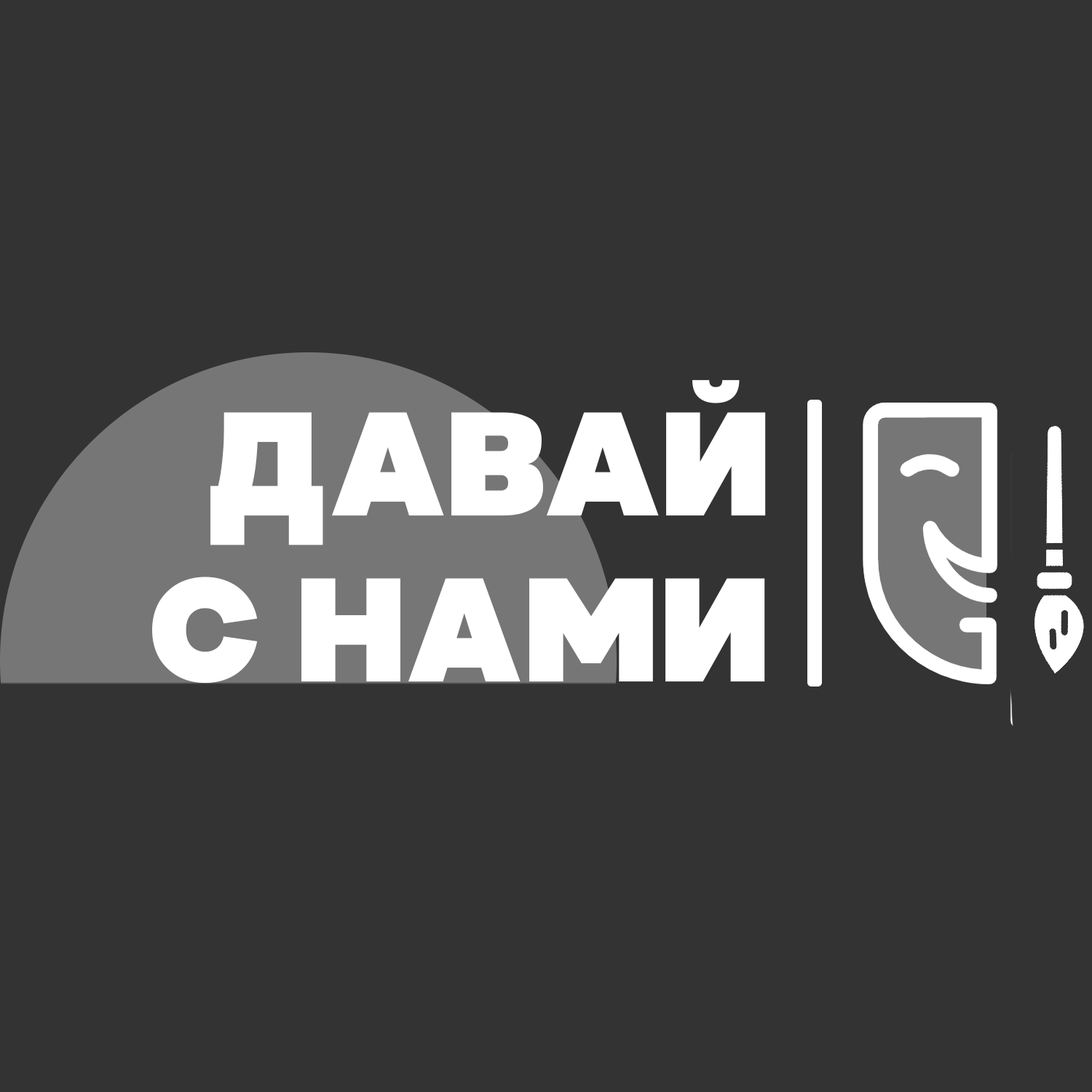
<style>
.page{position:relative;width:1092px;height:1092px;background:#333333}
.page>*{position:absolute;margin:0}
.t1{font:146.8px "Nominee-Heavy";color:#ffffff;text-transform:uppercase}
</style>
<div class="page">
<p class="t1" style="left:210px;top:380px;width:556px;height:165px">Давай</p>
<p class="t1" style="left:152px;top:577px;width:613px;height:107px">с нами</p>
</div>
